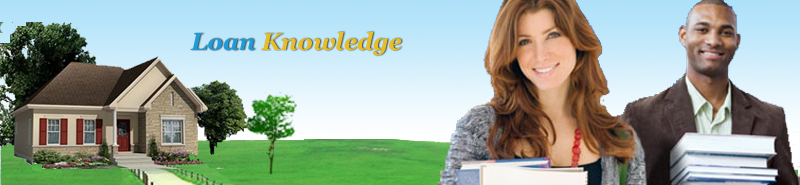
<style>
.page{position:relative;width:800px;height:185px}
.page>*{position:absolute;margin:0}
.t1{font:24px "Georgia-BoldItalic";color:#eabd22}
.t2{font:24px "CourierNewPS-BoldItalicMT";color:#0871dd}
.t3{font:24px "Georgia-BoldItalic";color:#1f9bd6}
</style>
<div class="page">
<p class="t1" style="left:190px;top:31px;width:212px;height:25px"><span class="t2">   </span><span class="t3">Loan </span>Knowledge</p>
</div>
